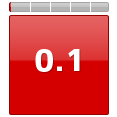
<style>
.page{position:relative;width:117px;height:117px;background:#d40000}
.page>*{position:absolute;margin:0}
.t1{font:36px "Colaborate-Bold";color:#ffffff;text-transform:uppercase}
</style>
<div class="page">
<p class="t1" style="left:35px;top:49px;width:45px;height:23px">0.1</p>
</div>
